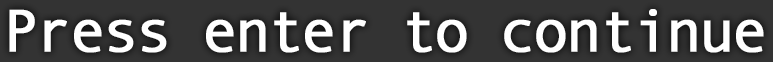
<style>
.page{position:relative;width:773px;height:62px;background:#333333}
.page>*{position:absolute;margin:0}
.t1{font:60px "AndaleMono";letter-spacing:-0.075em;color:#ffffff;font-weight:bold}
</style>
<div class="page">
<p class="t1" style="left:9px;top:9px;width:755px;height:44px">Press enter to continue</p>
</div>
